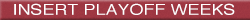
<style>
.page{position:relative;width:250px;height:20px}
.page>*{position:absolute;margin:0}
.t1{font:15px "Helvetica";color:#ffffff;scale:1.2 1}
</style>
<div class="page">
<p class="t1" style="left:14px;top:3px;width:221px;height:12px">INSERT PLAYOFF WEEKS</p>
</div>
